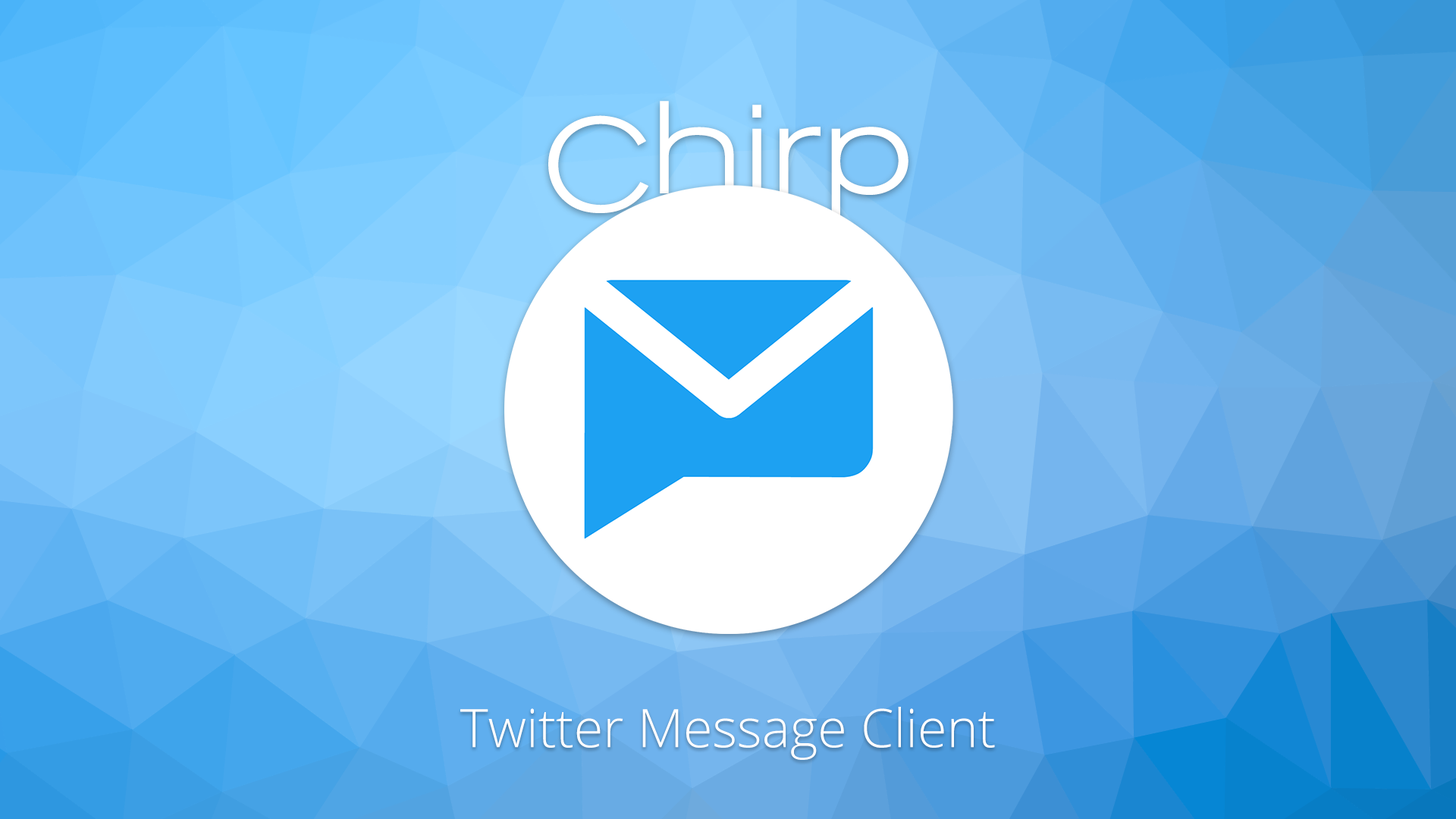
<style>
.page{position:relative;width:1456px;height:819px}
.page>*{position:absolute;margin:0}
.t1{font:130.4px "NissanAG-LightExtd";color:#ffffff}
.t2{font:53.1px "OpenSans-Light";color:#ffffff}
</style>
<div class="page">
<p class="t1" style="left:548px;top:101px;width:360px;height:117px">Chirp</p>
<p class="t2" style="left:460px;top:707px;width:535px;height:53px">Twitter Message Client</p>
</div>
